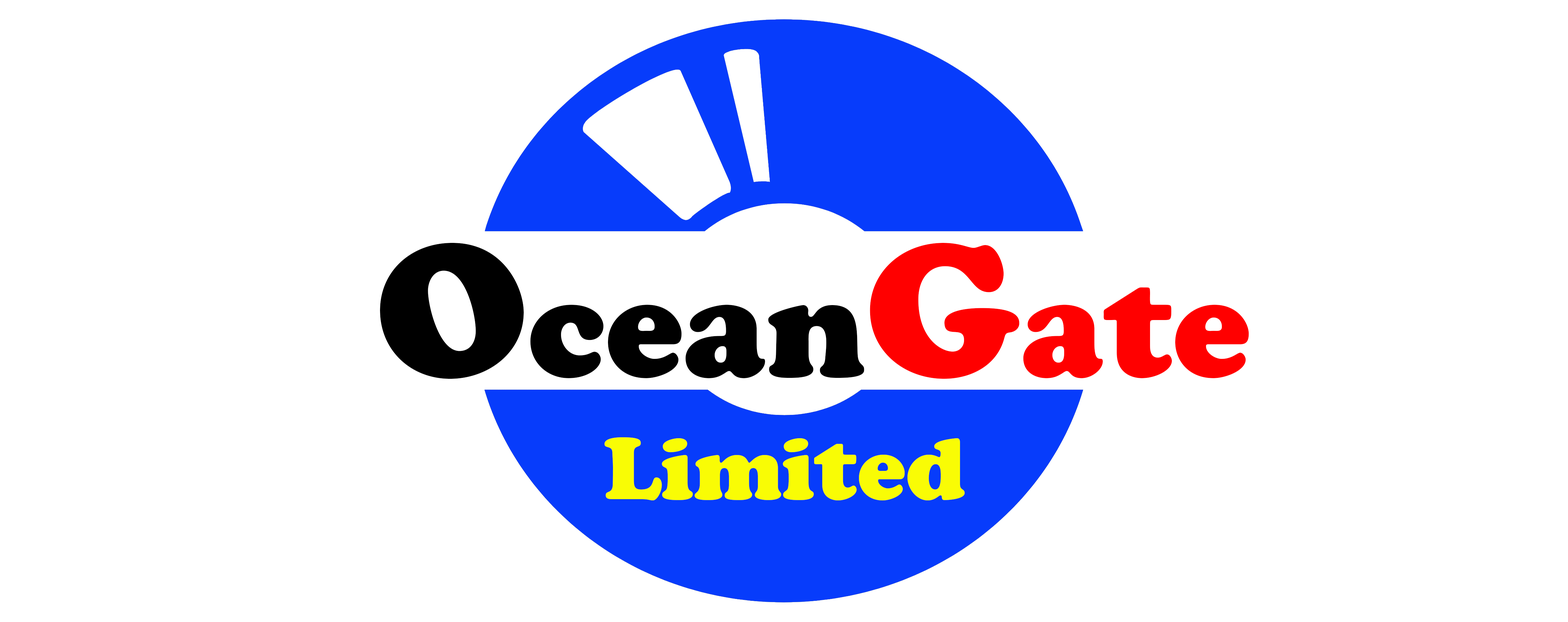
<style>
.page{position:relative;width:1568px;height:622px;background:#ffffff}
.page>*{position:absolute;margin:0}
.t1{font:139.9px "CooperBlackStd";color:#000000}
.t2{font:186.6px "CooperBlackStd";color:#000000}
.t3{font:186.6px "CooperBlackStd";color:#ff0000}
.t4{font:139.9px "CooperBlackStd";color:#ff0000}
.t5{font:87.1px "CooperBlackStd";color:#f9fc05}
</style>
<div class="page">
<p class="t1" style="left:380px;top:243px;width:869px;height:136px"><span class="t2">O</span>cean<span class="t3">G</span><span class="t4">ate</span></p>
<p class="t5" style="left:604px;top:437px;width:361px;height:64px">Limited</p>
</div>
